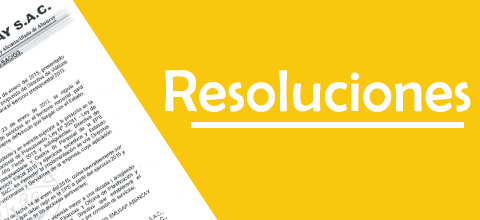
<style>
.page{position:relative;width:480px;height:220px;background:#f9c80e}
.page>*{position:absolute;margin:0}
.t1{font:59.4px "BerlinSansFB-Reg";letter-spacing:0.015em;color:#fefefe}
</style>
<div class="page">
<p class="t1" style="left:165px;top:70px;width:306px;height:42px">Resoluciones</p>
</div>
